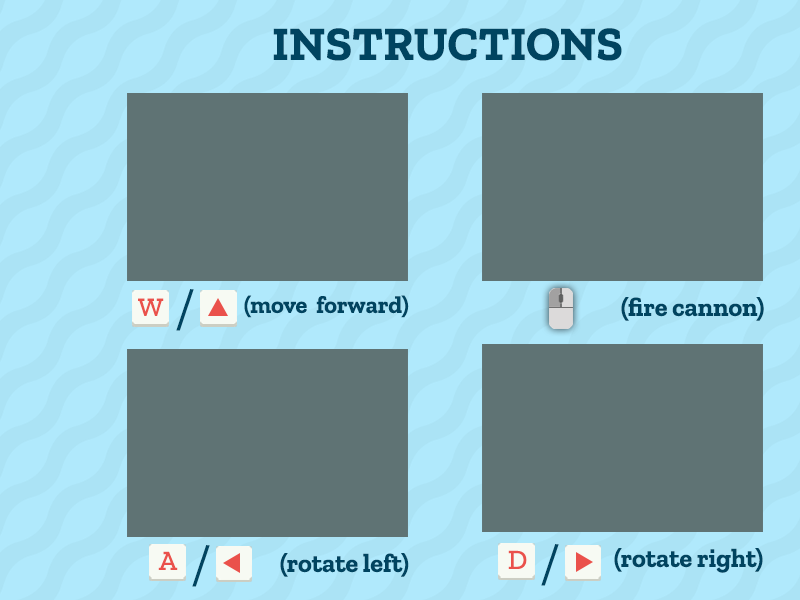
<style>
.page{position:relative;width:800px;height:600px;background:#5f7374}
.page>*{position:absolute;margin:0}
.t1{font:48px "ZillaSlab-Bold";color:#004460}
.t2{font:60px "ZillaSlab-Light";color:#004460}
.t3{font:26.6px "ZillaSlab-Medium";color:#ea514b}
.t4{font:24px "ZillaSlab-Bold";color:#004460}
.t5{font:26px "ZillaSlab-Bold";color:#004460}
.t6{font:27.6px "ZillaSlab-Medium";color:#ea514b}
</style>
<div class="page">
<p class="t1" style="left:273px;top:28px;width:349px;height:33px">INSTRUCTIONS</p>
<p class="t2" style="left:176px;top:289px;width:18px;height:42px;rotate:1deg">/</p>
<p class="t3" style="left:138px;top:298px;width:26px;height:18px">W</p>
<p class="t4" style="left:244px;top:295px;width:165px;height:23px">(move  forward)</p>
<p class="t5" style="left:621px;top:297px;width:143px;height:24px">(fire cannon)</p>
<p class="t2" style="left:192px;top:545px;width:18px;height:42px;rotate:1deg">/</p>
<p class="t2" style="left:541px;top:544px;width:18px;height:42px;rotate:1deg">/</p>
<p class="t6" style="left:158px;top:551px;width:20px;height:19px">A</p>
<p class="t5" style="left:280px;top:553px;width:129px;height:24px">(rotate left)</p>
<p class="t6" style="left:508px;top:550px;width:19px;height:19px">D</p>
<p class="t5" style="left:614px;top:548px;width:149px;height:25px">(rotate right)</p>
</div>
